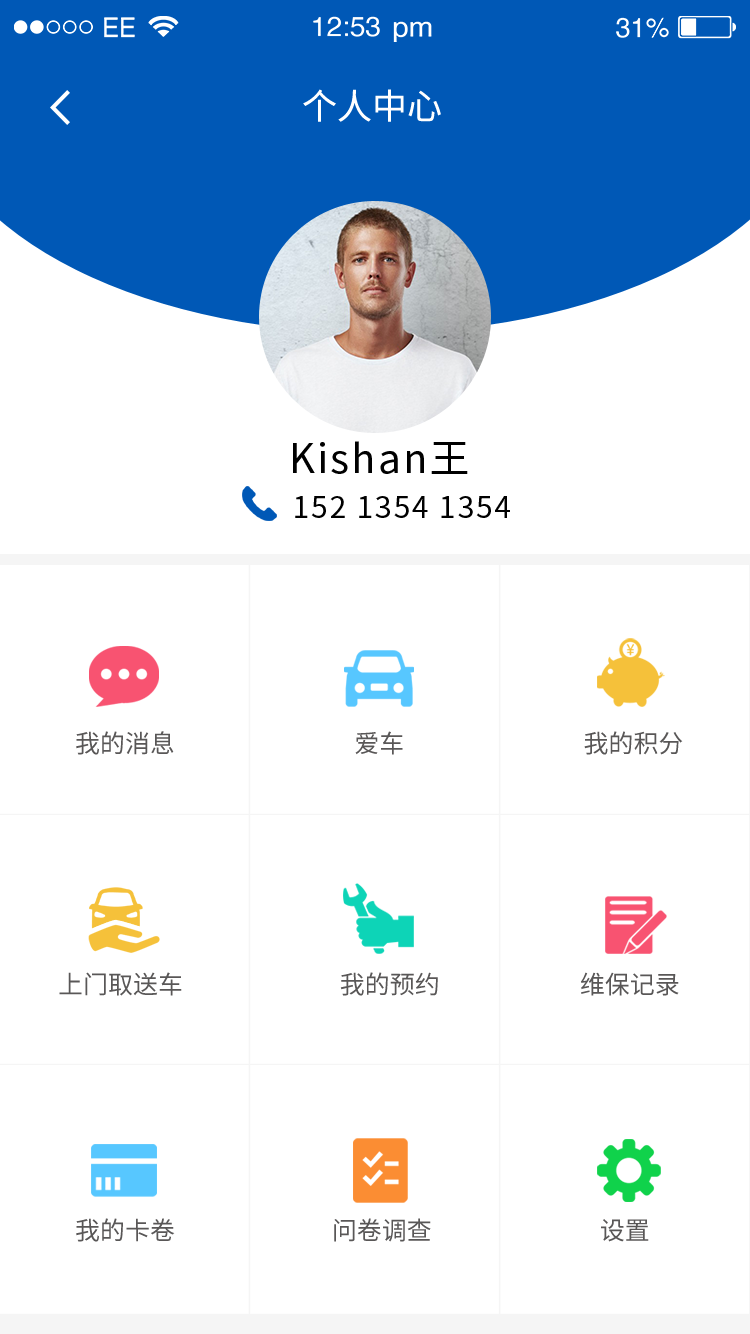
<style>
.page{position:relative;width:750px;height:1334px;background:#ffffff}
.page>*{position:absolute;margin:0}
.t1{font:35px "SourceHanSansCN-Regular";color:#ffffff}
.t2{font:40px "SourceHanSansCN-Regular";letter-spacing:0.06em;color:#000000}
.t3{font:30px "SourceHanSansCN-Regular";letter-spacing:0.06em;color:#000000}
.t4{font:25px "SourceHanSansCN-Regular";color:#595757}
</style>
<div class="page">
<p class="t1" style="left:303px;top:89px;width:138px;height:33px">个人中心</p>
<p class="t2" style="left:293px;top:441px;width:175px;height:33px">Kishan王</p>
<p class="t3" style="left:295px;top:496px;width:215px;height:22px">152 1354 1354</p>
<p class="t4" style="left:76px;top:731px;width:607px;height:24px">我的消息                                爱车                                我的积分</p>
<p class="t4" style="left:59px;top:972px;width:620px;height:24px">上门取送车                            我的预约                         维保记录</p>
<p class="t4" style="left:76px;top:1218px;width:573px;height:24px">我的卡卷                            问卷调查                              设置</p>
</div>
